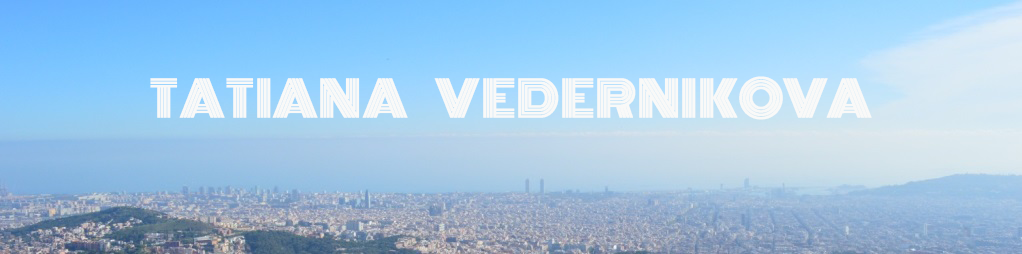
<style>
.page{position:relative;width:1022px;height:254px}
.page>*{position:absolute;margin:0}
.t1{font:48px "Monoton-Regular";color:#f9f9f8;text-transform:uppercase;font-weight:bold}
</style>
<div class="page">
<p class="t1" style="left:150px;top:76px;width:722px;height:44px">Tatiana    Vedernikova</p>
</div>
